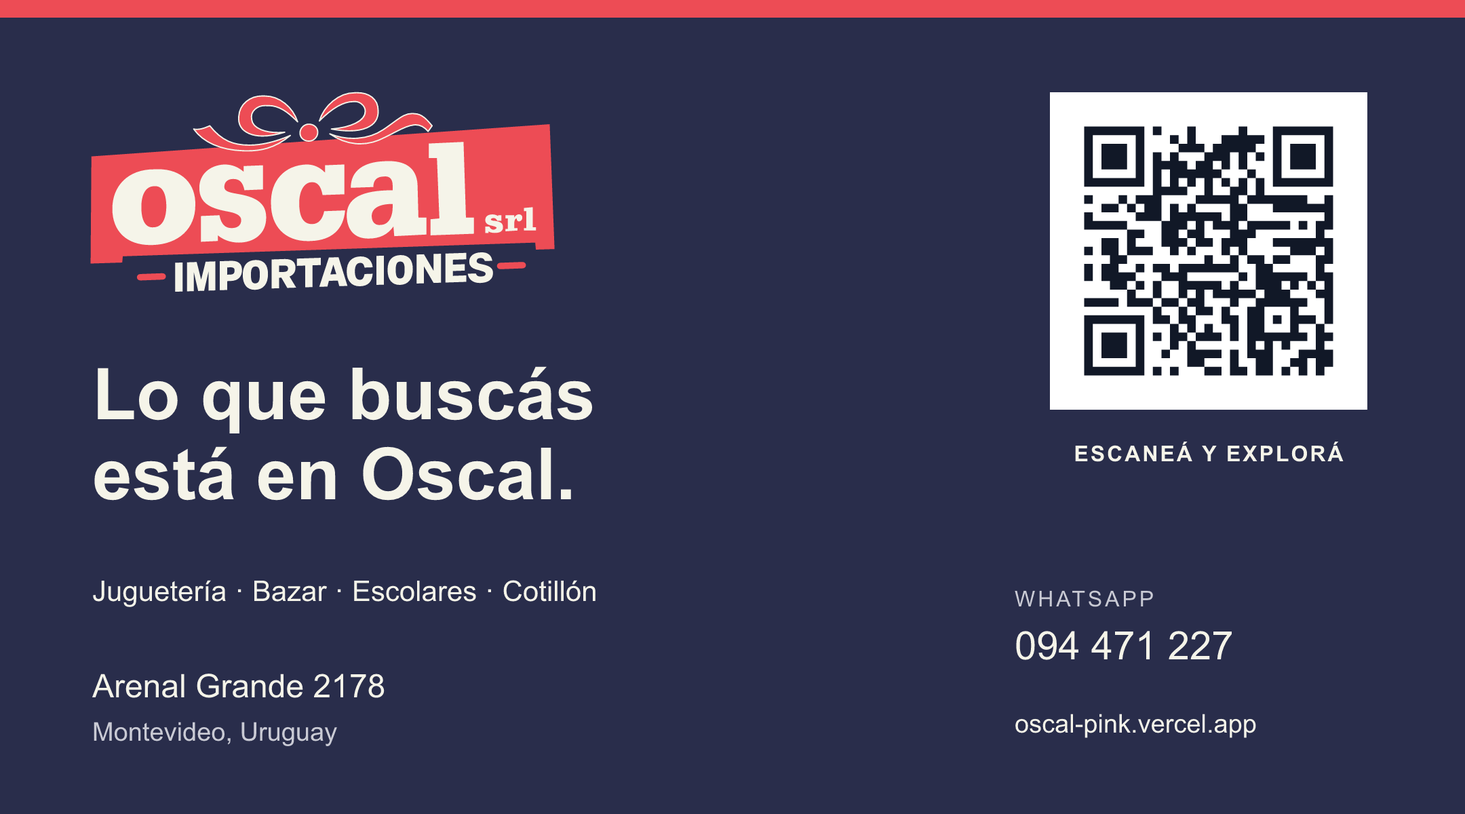
<style>
.page{position:relative;width:1465px;height:814px;background:#292d4b}
.page>*{position:absolute;margin:0}
.t1{font:71.9px "Arial-BoldMT";color:#f5f4e9}
.t2{font:21.7px "Arial-BoldMT";letter-spacing:0.094em;color:#f5f4e9}
.t3{font:28.5px "ArialMT";color:#f5f4e9}
.t4{font:21.7px "ArialMT";letter-spacing:0.125em;color:#c9cad4}
.t5{font:39.3px "ArialMT";color:#f5f4e9}
.t6{font:32.6px "ArialMT";color:#f5f4e9}
.t7{font:25.8px "ArialMT";color:#f5f4e9}
.t8{font:25.8px "ArialMT";color:#c9cad4}
</style>
<div class="page">
<p class="t1" style="left:98px;top:366px;width:494px;height:67px">Lo que buscás</p>
<p class="t1" style="left:94px;top:446px;width:477px;height:55px">está en Oscal.</p>
<p class="t2" style="left:1075px;top:442px;width:269px;height:20px">ESCANEÁ Y EXPLORÁ</p>
<p class="t3" style="left:93px;top:580px;width:503px;height:27px">Juguetería · Bazar · Escolares · Cotillón</p>
<p class="t4" style="left:1015px;top:590px;width:138px;height:17px">WHATSAPP</p>
<p class="t5" style="left:1016px;top:631px;width:216px;height:29px">094 471 227</p>
<p class="t6" style="left:92px;top:674px;width:293px;height:24px">Arenal Grande 2178</p>
<p class="t7" style="left:1015px;top:714px;width:241px;height:24px">oscal-pink.vercel.app</p>
<p class="t8" style="left:94px;top:722px;width:243px;height:24px">Montevideo, Uruguay</p>
</div>
